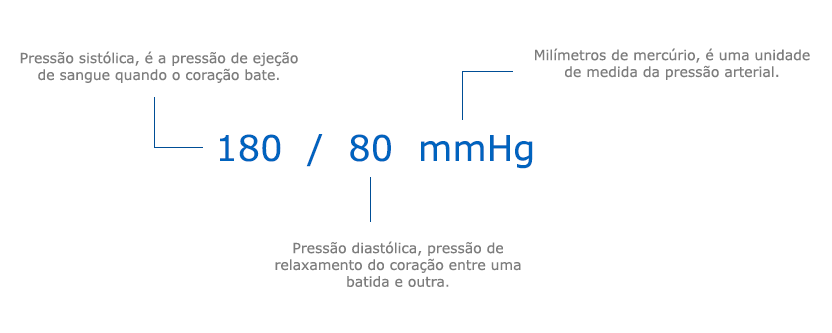
<style>
.page{position:relative;width:832px;height:333px;background:#ffffff}
.page>*{position:absolute;margin:0}
.t1{font:14px "Verdana";color:#7d7d7d}
.t2{font:35.3px "Verdana";color:#0063be}
</style>
<div class="page">
<p class="t1" style="left:20px;top:51px;width:278px;height:32px;text-align:center">Pressão sistólica, é a pressão de ejeção de sangue quando o coração bate.</p>
<p class="t1" style="left:535px;top:48px;width:275px;height:32px;text-align:center">Milímetros de mercúrio, é uma unidade de medida da pressão arterial.</p>
<p class="t2" style="left:220px;top:134px;width:313px;height:35px">180  /  80  mmHg</p>
<p class="t1" style="left:275px;top:241px;width:246px;height:46px;text-align:center">Pressão diastólica, pressão de relaxamento do coração entre uma batida e outra.</p>
</div>
